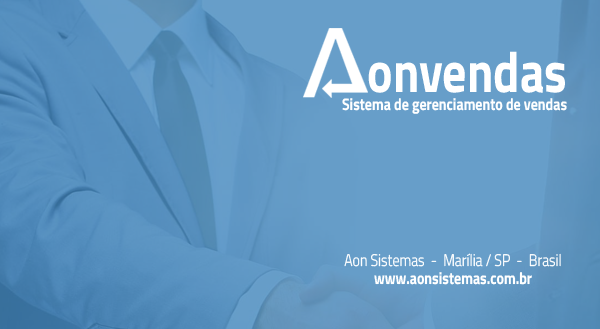
<style>
.page{position:relative;width:600px;height:329px;background:#679ec9}
.page>*{position:absolute;margin:0}
.t1{font:16.8px/18px "TitilliumWeb-Bold";color:#ffffff;scale:0.83 1}
.t2{font:57.6px/18px "TitilliumWeb-Bold";color:#ffffff;scale:0.83 1}
.t3{font:16.8px/18px "TitilliumWeb-Light";color:#ffffff;scale:0.83 1}
</style>
<div class="page">
<p class="t1" style="left:342px;top:51px;width:225px;height:63px;text-align:right"><span class="t2">onvendas<br></span>Sistema de gerenciamento de vendas</p>
<p class="t3" style="left:344px;top:253px;width:217px;height:32px;text-align:center">Aon Sistemas  -  Marília / SP  -  Brasil<br><span class="t1">www.aonsistemas.com.br</span></p>
</div>
